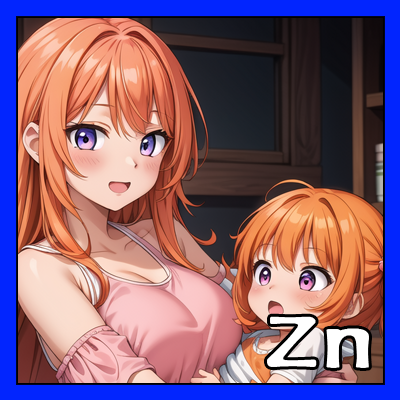
<style>
.page{position:relative;width:400px;height:400px}
.page>*{position:absolute;margin:0}
.t1{font:74.2px "YetR-HM";color:#ffffff;font-weight:bold;scale:1.33 1}
</style>
<div class="page">
<p class="t1" style="left:265px;top:315px;width:106px;height:55px">Zn</p>
</div>
